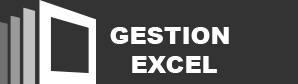
<style>
.page{position:relative;width:298px;height:84px;background:#333333}
.page>*{position:absolute;margin:0}
.t1{font:24px "Arial-Black";color:#ffffff}
</style>
<div class="page">
<p class="t1" style="left:110px;top:27px;width:119px;height:46px;text-align:center">GESTION <br>EXCEL</p>
</div>
